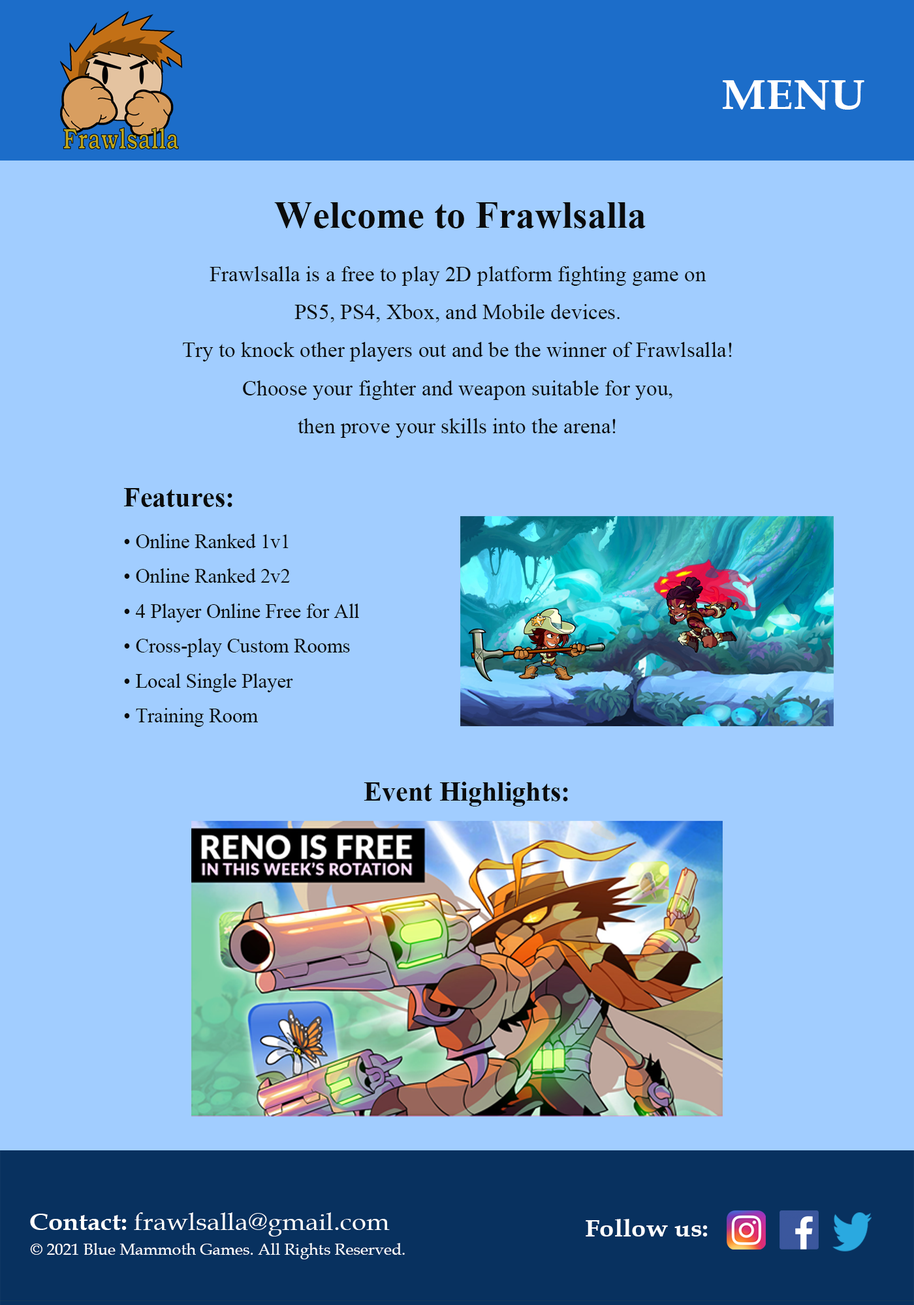
<style>
.page{position:relative;width:914px;height:1305px;background:#a1cdff}
.page>*{position:absolute;margin:0}
.t1{font:41.7px "BookAntiqua-Bold";color:#ffffff;scale:1.07 1}
.t2{font:21.8px "TimesNewRomanPSMT";color:#0b0c0c}
.t3{font:38.1px "TimesNewRomanPS-BoldMT";color:#0b0c0c}
.t4{font:19.9px "TimesNewRomanPSMT";color:#0b0c0c}
.t5{font:27.4px "TimesNewRomanPS-BoldMT";color:#0b0c0c}
.t6{font:24.5px "BookAntiqua";color:#ffffff;scale:1.07 1}
.t7{font:24.5px "BookAntiqua-Bold";color:#ffffff;scale:1.07 1}
.t8{font:16.3px "BookAntiqua";color:#ffffff}
</style>
<div class="page">
<p class="t1" style="left:722px;top:80px;width:142px;height:30px">MENU</p>
<p class="t2" style="left:183px;top:202px;width:549px;height:236px;text-align:center"><span class="t3">Welcome to Frawlsalla<br></span>Frawlsalla is a free to play 2D platform fighting game on <br>PS5, PS4, Xbox, and Mobile devices. <br>Try to knock other players out and be the winner of Frawlsalla! <br>Choose your fighter and weapon suitable for you, <br>then prove your skills into the arena!</p>
<p class="t4" style="left:123px;top:488px;width:236px;height:239px"><span class="t5">Features:<br></span>• Online Ranked 1v1<br>• Online Ranked 2v2<br>• 4 Player Online Free for All<br>• Cross-play Custom Rooms<br>• Local Single Player<br>• Training Room</p>
<p class="t5" style="left:363px;top:782px;width:205px;height:25px">Event Highlights:</p>
<p class="t6" style="left:30px;top:1213px;width:360px;height:24px"><span class="t7">Contact: </span>frawlsalla@gmail.com</p>
<p class="t7" style="left:585px;top:1219px;width:122px;height:18px">Follow us:</p>
<p class="t8" style="left:30px;top:1243px;width:375px;height:16px">© 2021 Blue Mammoth Games. All Rights Reserved.</p>
</div>
